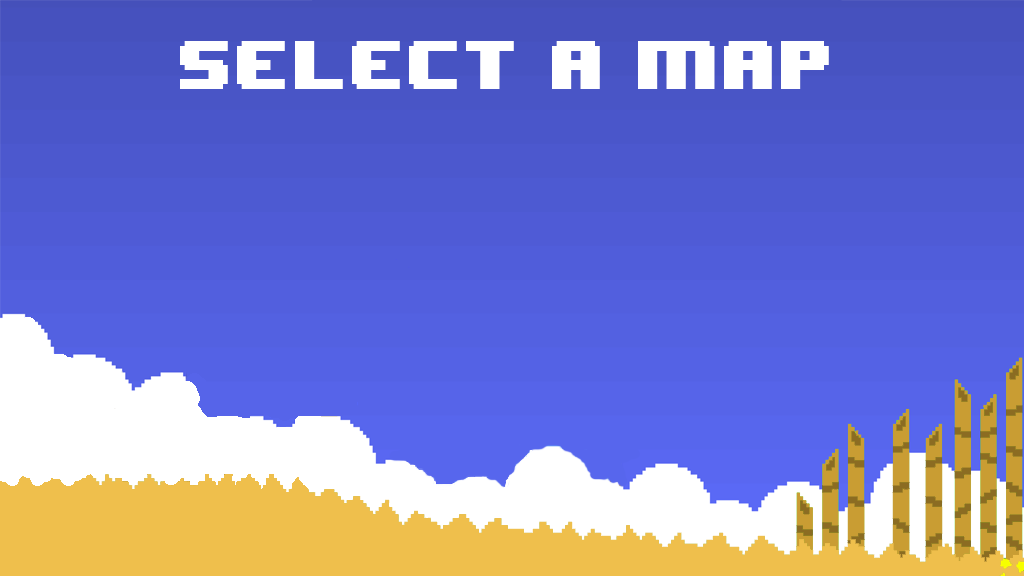
<style>
.page{position:relative;width:1024px;height:576px}
.page>*{position:absolute;margin:0}
.t1{font:57.3px "8BITWONDERNominal";color:#ffffff}
</style>
<div class="page">
<p class="t1" style="left:180px;top:41px;width:649px;height:48px">SELECT A MAP</p>
</div>
